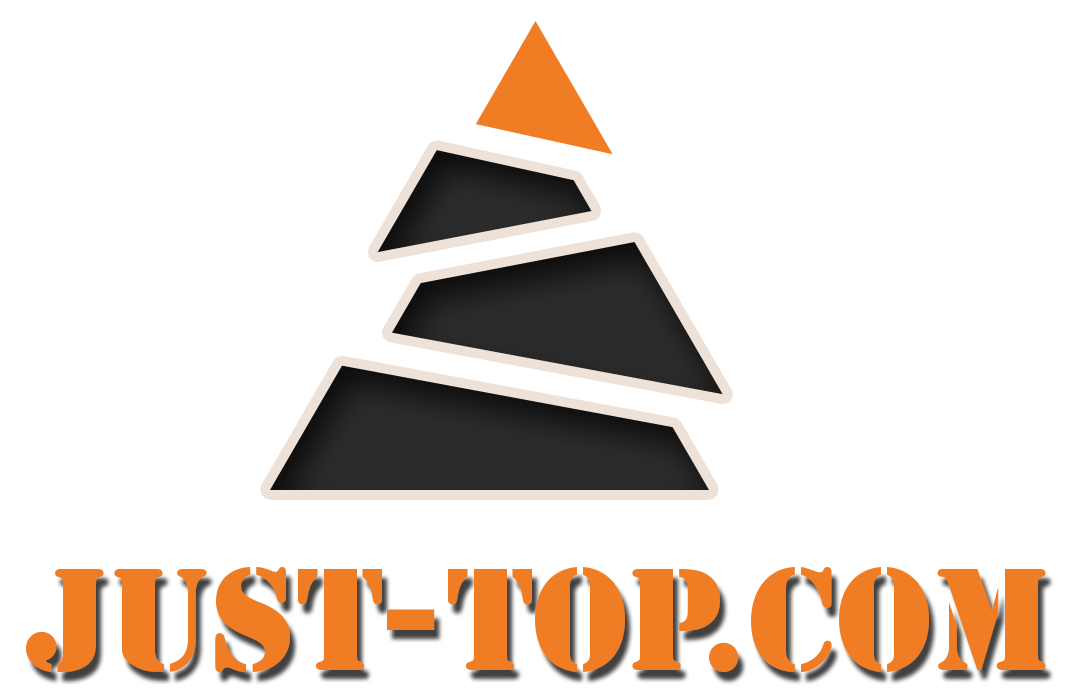
<style>
.page{position:relative;width:1076px;height:700px;background:#ffffff}
.page>*{position:absolute;margin:0}
.t1{font:135px "StencilStd";color:#f07c23}
</style>
<div class="page">
<p class="t1" style="left:26px;top:567px;width:1020px;height:106px">JUST-TOP.com</p>
</div>
